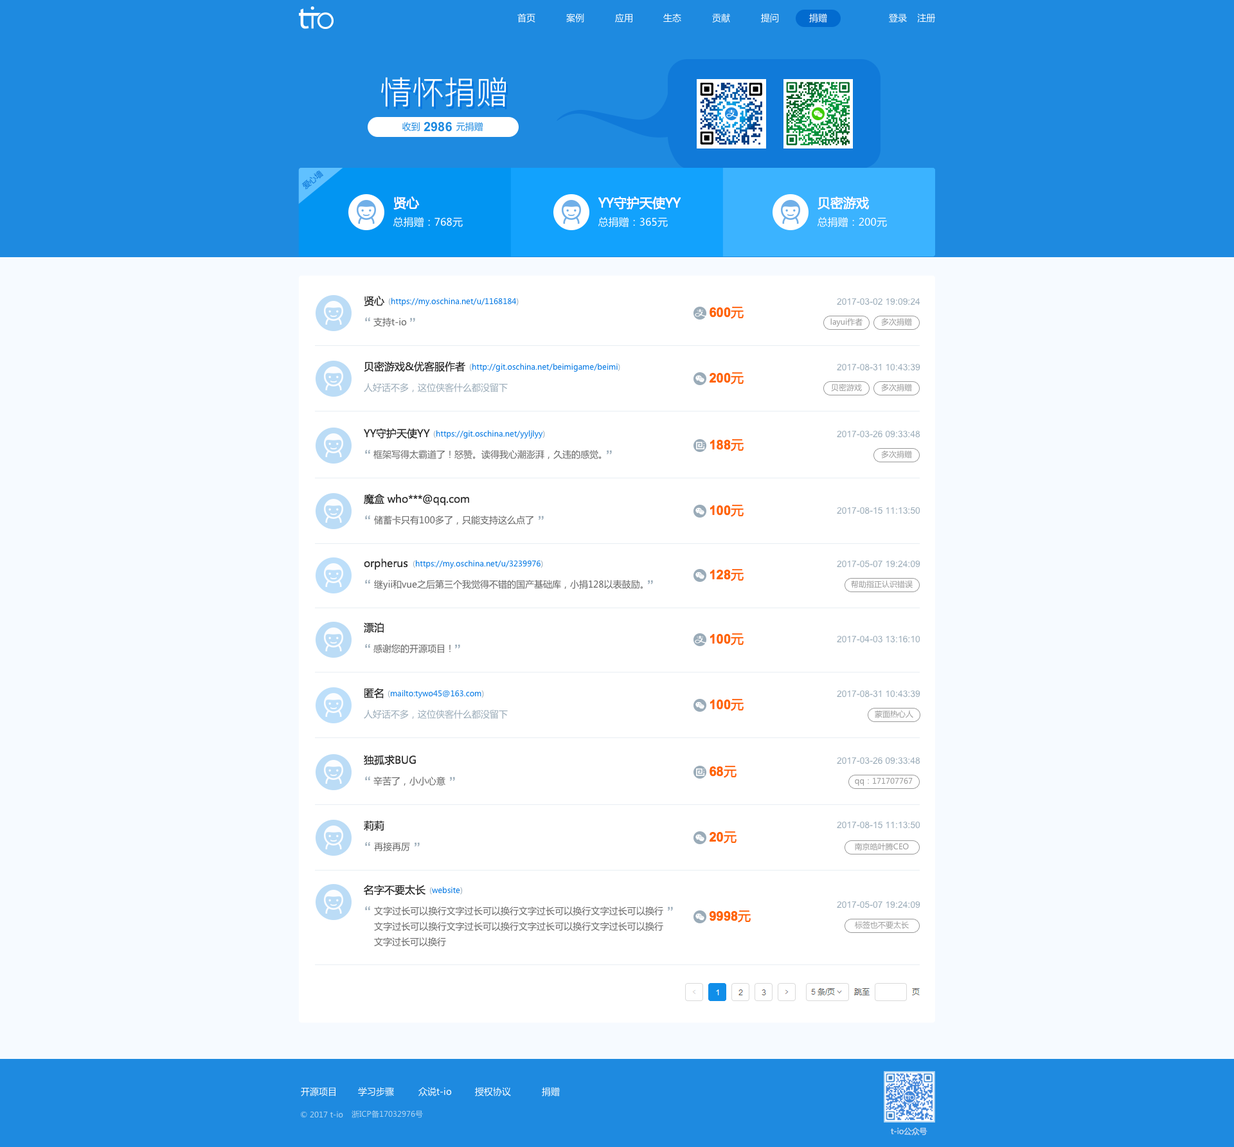
<style>
.page{position:relative;width:1234px;height:1147px;background:#f6faff}
.page>*{position:absolute;margin:0}
.t1{font:9px "MicrosoftYaHei";color:#ffffff}
.t2{font:32.1px "PingFangSC-Light";color:#ffffff}
.t3{font:9px "MicrosoftYaHei";color:#1e8ae0}
.t4{font:12.9px "Arial-BoldMT";color:#1e8ae0}
.t5{font:7.7px "MicrosoftYaHei";color:#107ad9}
.t6{font:12.9px "MicrosoftYaHei";color:#ffffff}
.t7{font:10.3px "MicrosoftYaHei";color:#ffffff}
.t8{font:10.3px "MicrosoftYaHei";color:#333333}
.t9{font:7.7px "MicrosoftYaHei";color:#0478e3}
.t10{font:7.7px "MicrosoftYaHei";color:#9aabb8}
.t11{font:9px "ArialMT";color:#9aabb8}
.t12{font:12.9px "Arial-BoldMT";color:#9aabb8}
.t13{font:9px "MicrosoftYaHei";color:#666666}
.t14{font:12.9px "Arial-BoldMT";color:#ff6600}
.t15{font:12.9px "MicrosoftYaHei";color:#ff6600}
.t16{font:7.7px "MicrosoftYaHei";color:#999999}
.t17{font:9px "MicrosoftYaHei";color:#9aabb8}
.t18{font:9px/15.4px "MicrosoftYaHei";color:#666666}
.t19{font:7.7px "MicrosoftYaHei";color:#b1d5f1}
.t20{font:7.7px "MicrosoftYaHei";color:#a7d0f0}
</style>
<div class="page">
<p class="t1" style="left:518px;top:14px;width:18px;height:8px">首页</p>
<p class="t1" style="left:566px;top:14px;width:18px;height:8px">案例</p>
<p class="t1" style="left:615px;top:14px;width:18px;height:8px">应用</p>
<p class="t1" style="left:663px;top:14px;width:18px;height:8px">生态</p>
<p class="t1" style="left:712px;top:14px;width:18px;height:8px">贡献</p>
<p class="t1" style="left:761px;top:14px;width:18px;height:8px">提问</p>
<p class="t1" style="left:809px;top:14px;width:18px;height:8px">捐赠</p>
<p class="t1" style="left:889px;top:14px;width:47px;height:8px">登录    注册</p>
<p class="t2" style="left:381px;top:77px;width:125px;height:30px">情怀捐赠</p>
<p class="t3" style="left:402px;top:122px;width:18px;height:9px">收到</p>
<p class="t4" style="left:424px;top:122px;width:28px;height:10px">2986</p>
<p class="t3" style="left:456px;top:122px;width:27px;height:9px">元捐赠</p>
<p class="t5" style="left:302px;top:170px;width:21px;height:20px;rotate:-40deg">爱心墙</p>
<p class="t5" style="left:302px;top:170px;width:21px;height:20px;rotate:-40deg">爱心墙</p>
<p class="t6" style="left:393px;top:196px;width:27px;height:14px">贤心</p>
<p class="t6" style="left:393px;top:196px;width:27px;height:14px">贤心</p>
<p class="t6" style="left:598px;top:196px;width:83px;height:14px">YY守护天使YY</p>
<p class="t6" style="left:598px;top:196px;width:83px;height:14px">YY守护天使YY</p>
<p class="t6" style="left:818px;top:196px;width:52px;height:14px">贝密游戏</p>
<p class="t6" style="left:818px;top:196px;width:52px;height:14px">贝密游戏</p>
<p class="t7" style="left:393px;top:217px;width:70px;height:11px">总捐赠：768元</p>
<p class="t7" style="left:393px;top:217px;width:70px;height:11px">总捐赠：768元</p>
<p class="t7" style="left:598px;top:217px;width:70px;height:11px">总捐赠：365元</p>
<p class="t7" style="left:598px;top:217px;width:70px;height:11px">总捐赠：365元</p>
<p class="t7" style="left:818px;top:217px;width:69px;height:11px">总捐赠：200元</p>
<p class="t7" style="left:818px;top:217px;width:69px;height:11px">总捐赠：200元</p>
<p class="t8" style="left:364px;top:296px;width:21px;height:11px">贤心</p>
<p class="t9" style="left:388px;top:298px;width:131px;height:8px"><span class="t10">(</span>https://my.oschina.net/u/1168184<span class="t10">)</span></p>
<p class="t11" style="left:837px;top:298px;width:84px;height:7px">2017-03-02 19:09:24</p>
<p class="t12" style="left:365px;top:317px;width:5px;height:4px">“</p>
<p class="t13" style="left:374px;top:318px;width:33px;height:9px">支持t-io</p>
<p class="t12" style="left:410px;top:318px;width:5px;height:4px">”</p>
<p class="t14" style="left:710px;top:307px;width:34px;height:12px">600<span class="t15">元</span></p>
<p class="t16" style="left:831px;top:318px;width:32px;height:9px">layui作者</p>
<p class="t16" style="left:881px;top:318px;width:31px;height:8px">多次捐赠</p>
<p class="t8" style="left:364px;top:361px;width:101px;height:11px">贝密游戏&amp;优客服作者</p>
<p class="t9" style="left:469px;top:363px;width:151px;height:9px"><span class="t10">(</span>http://git.oschina.net/beimigame/beimi<span class="t10">)</span></p>
<p class="t11" style="left:837px;top:363px;width:84px;height:8px">2017-08-31 10:43:39</p>
<p class="t14" style="left:709px;top:372px;width:35px;height:12px">200<span class="t15">元</span></p>
<p class="t17" style="left:364px;top:383px;width:144px;height:9px">人好话不多，这位侠客什么都没留下</p>
<p class="t16" style="left:831px;top:384px;width:31px;height:8px">贝密游戏</p>
<p class="t16" style="left:881px;top:384px;width:31px;height:8px">多次捐赠</p>
<p class="t8" style="left:364px;top:428px;width:66px;height:11px">YY守护天使YY</p>
<p class="t9" style="left:433px;top:430px;width:112px;height:8px"><span class="t10">(</span>https://git.oschina.net/yyljlyy<span class="t10">)</span></p>
<p class="t11" style="left:837px;top:431px;width:84px;height:7px">2017-03-26 09:33:48</p>
<p class="t12" style="left:365px;top:449px;width:5px;height:5px">“</p>
<p class="t14" style="left:710px;top:439px;width:34px;height:12px">188<span class="t15">元</span></p>
<p class="t13" style="left:374px;top:450px;width:228px;height:9px">框架写得太霸道了！怒赞。读得我心潮澎湃，久违的感觉。</p>
<p class="t12" style="left:607px;top:450px;width:5px;height:5px">”</p>
<p class="t16" style="left:881px;top:451px;width:31px;height:7px">多次捐赠</p>
<p class="t8" style="left:364px;top:494px;width:105px;height:11px">魔盒 who***@qq.com</p>
<p class="t14" style="left:710px;top:505px;width:34px;height:12px">100<span class="t15">元</span></p>
<p class="t11" style="left:837px;top:507px;width:84px;height:7px">2017-08-15 11:13:50</p>
<p class="t12" style="left:365px;top:515px;width:5px;height:4px">“</p>
<p class="t13" style="left:374px;top:516px;width:160px;height:9px">储蓄卡只有100多了，只能支持这么点了</p>
<p class="t12" style="left:539px;top:516px;width:5px;height:4px">”</p>
<p class="t8" style="left:364px;top:558px;width:44px;height:12px">orpherus</p>
<p class="t9" style="left:413px;top:560px;width:130px;height:8px"><span class="t10">(</span>https://my.oschina.net/u/3239976<span class="t10">)</span></p>
<p class="t14" style="left:710px;top:569px;width:34px;height:12px">128<span class="t15">元</span></p>
<p class="t11" style="left:837px;top:561px;width:84px;height:7px">2017-05-07 19:24:09</p>
<p class="t12" style="left:365px;top:579px;width:5px;height:5px">“</p>
<p class="t13" style="left:374px;top:580px;width:269px;height:10px">继yii和vue之后第三个我觉得不错的国产基础库，小捐128以表鼓励。</p>
<p class="t12" style="left:648px;top:580px;width:5px;height:4px">”</p>
<p class="t16" style="left:851px;top:580px;width:62px;height:8px">帮助指正认识错误</p>
<p class="t8" style="left:364px;top:622px;width:20px;height:11px">漂泊</p>
<p class="t14" style="left:710px;top:633px;width:34px;height:12px">100<span class="t15">元</span></p>
<p class="t11" style="left:837px;top:635px;width:84px;height:8px">2017-04-03 13:16:10</p>
<p class="t12" style="left:365px;top:644px;width:5px;height:4px">“</p>
<p class="t13" style="left:374px;top:644px;width:77px;height:9px">感谢您的开源项目！</p>
<p class="t12" style="left:455px;top:644px;width:5px;height:5px">”</p>
<p class="t8" style="left:364px;top:688px;width:20px;height:11px">匿名</p>
<p class="t9" style="left:388px;top:690px;width:96px;height:8px"><span class="t10">(</span>mailto:tywo45@163.com<span class="t10">)</span></p>
<p class="t11" style="left:837px;top:690px;width:84px;height:8px">2017-08-31 10:43:39</p>
<p class="t14" style="left:710px;top:699px;width:34px;height:12px">100<span class="t15">元</span></p>
<p class="t17" style="left:364px;top:710px;width:144px;height:9px">人好话不多，这位侠客什么都没留下</p>
<p class="t16" style="left:875px;top:710px;width:39px;height:8px">蒙面热心人</p>
<p class="t8" style="left:364px;top:755px;width:52px;height:10px">独孤求BUG</p>
<p class="t11" style="left:837px;top:757px;width:84px;height:7px">2017-03-26 09:33:48</p>
<p class="t14" style="left:710px;top:766px;width:27px;height:12px">68<span class="t15">元</span></p>
<p class="t12" style="left:365px;top:776px;width:5px;height:4px">“</p>
<p class="t13" style="left:374px;top:777px;width:72px;height:9px">辛苦了，小小心意</p>
<p class="t12" style="left:450px;top:777px;width:5px;height:4px">”</p>
<p class="t16" style="left:855px;top:777px;width:58px;height:9px">qq：171707767</p>
<p class="t8" style="left:364px;top:820px;width:20px;height:11px">莉莉</p>
<p class="t11" style="left:837px;top:821px;width:84px;height:8px">2017-08-15 11:13:50</p>
<p class="t14" style="left:709px;top:831px;width:28px;height:12px">20<span class="t15">元</span></p>
<p class="t12" style="left:365px;top:842px;width:5px;height:4px">“</p>
<p class="t13" style="left:374px;top:842px;width:36px;height:9px">再接再厉</p>
<p class="t12" style="left:415px;top:842px;width:5px;height:5px">”</p>
<p class="t16" style="left:855px;top:843px;width:54px;height:8px">南京皓叶腾CEO</p>
<p class="t8" style="left:364px;top:885px;width:62px;height:11px">名字不要太长</p>
<p class="t9" style="left:429px;top:887px;width:34px;height:8px"><span class="t10">(</span>website<span class="t10">)</span></p>
<p class="t12" style="left:365px;top:906px;width:5px;height:4px">“</p>
<p class="t11" style="left:837px;top:901px;width:84px;height:7px">2017-05-07 19:24:09</p>
<p class="t18" style="left:374px;top:906px;width:289px;height:40px;text-align:justify">文字过长可以换行文字过长可以换行文字过长可以换行文字过长可以换行文字过长可以换行文字过长可以换行文字过长可以换行文字过长可以换行文字过长可以换行</p>
<p class="t12" style="left:668px;top:906px;width:5px;height:5px">”</p>
<p class="t14" style="left:709px;top:910px;width:42px;height:13px">9998<span class="t15">元</span></p>
<p class="t16" style="left:855px;top:921px;width:54px;height:8px">标签也不要太长</p>
<p class="t1" style="left:301px;top:1087px;width:35px;height:9px">开源项目</p>
<p class="t1" style="left:358px;top:1087px;width:36px;height:9px">学习步骤</p>
<p class="t1" style="left:419px;top:1087px;width:33px;height:9px">众说t-io</p>
<p class="t1" style="left:475px;top:1087px;width:36px;height:9px">授权协议</p>
<p class="t1" style="left:542px;top:1087px;width:18px;height:9px">捐赠</p>
<p class="t19" style="left:301px;top:1111px;width:42px;height:7px">© 2017 t-io</p>
<p class="t19" style="left:352px;top:1110px;width:71px;height:8px">浙ICP备17032976号</p>
<p class="t20" style="left:891px;top:1127px;width:37px;height:8px">t-io公众号</p>
</div>
